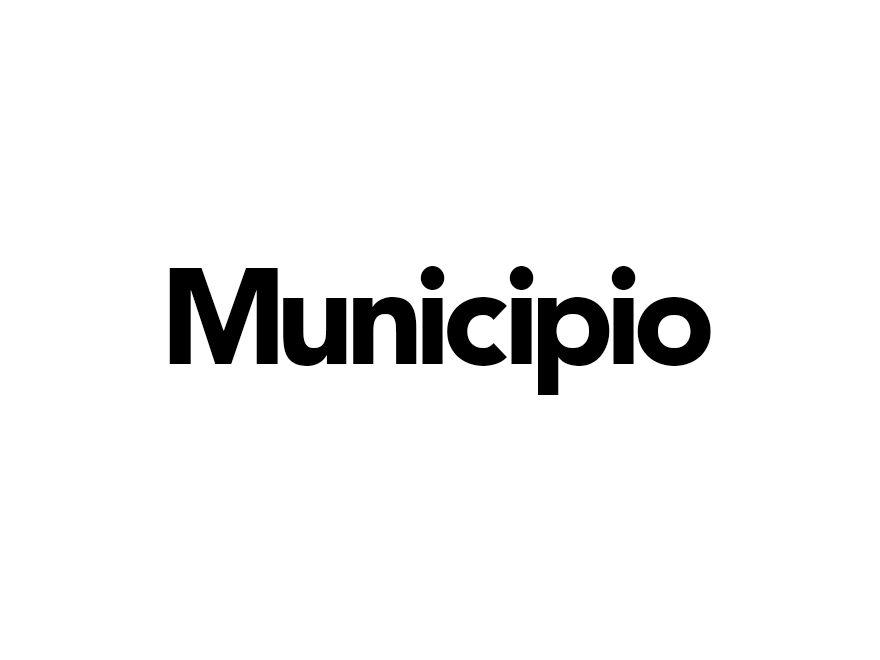
<style>
.page{position:relative;width:880px;height:660px;background:#ffffff}
.page>*{position:absolute;margin:0}
.t1{font:135px "Avenir-Black";letter-spacing:-0.08em;color:#000000}
</style>
<div class="page">
<p class="t1" style="left:169px;top:266px;width:542px;height:129px">Municipio</p>
</div>
